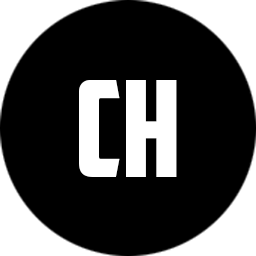
<style>
.page{position:relative;width:256px;height:256px;background:#000000}
.page>*{position:absolute;margin:0}
.t1{font:134px "AmericanCaptain";color:#ffffff}
</style>
<div class="page">
<p class="t1" style="left:79px;top:80px;width:98px;height:97px">CH</p>
</div>
